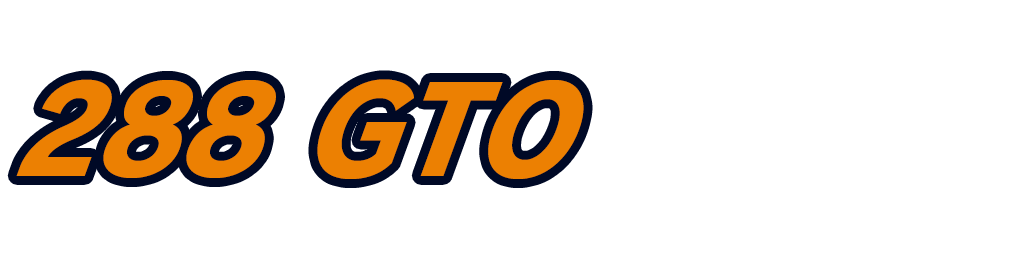
<style>
.page{position:relative;width:1024px;height:256px;background:#ffffff}
.page>*{position:absolute;margin:0}
.t1{font:128px "RodinPro-EB";letter-spacing:0.001em;color:#ec8002;scale:0.94 1}
</style>
<div class="page">
<p class="t1" style="left:16px;top:79px;width:568px;height:100px">288 GTO</p>
</div>
